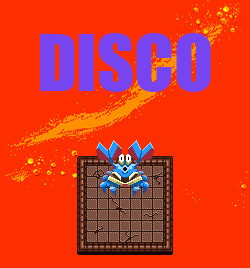
<style>
.page{position:relative;width:250px;height:268px;background:#fd2f01}
.page>*{position:absolute;margin:0}
.t1{font:72px "Impact";color:#7644f0}
</style>
<div class="page">
<p class="t1" style="left:40px;top:33px;width:171px;height:59px">DISCO</p>
</div>
